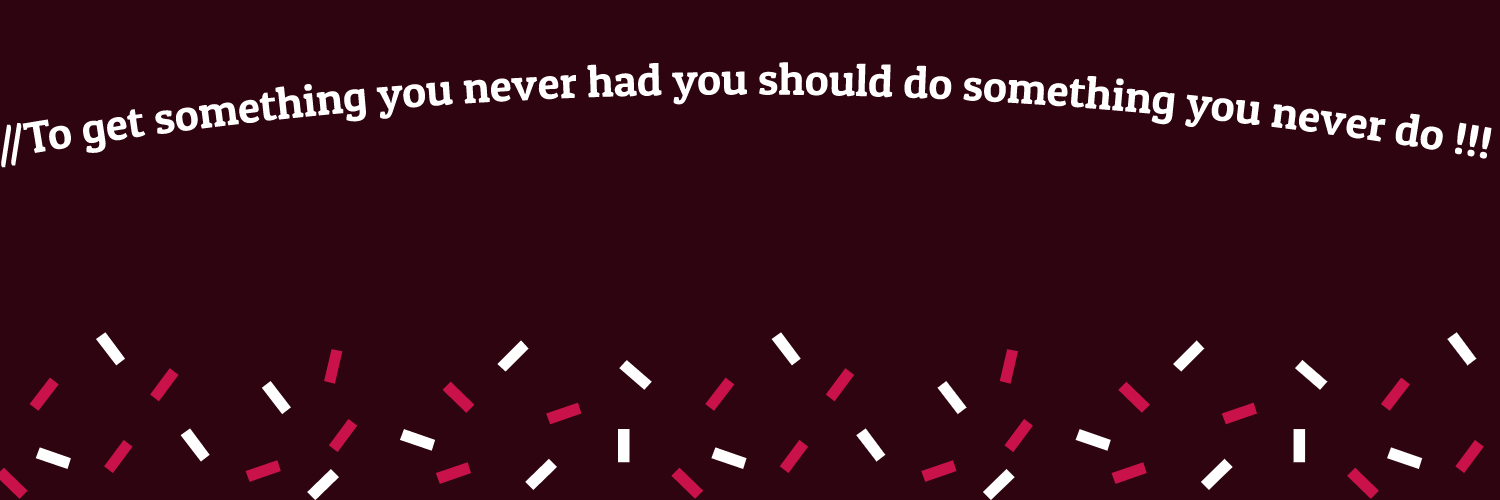
<style>
.page{position:relative;width:1500px;height:500px;background:#2f0411}
.page>*{position:absolute;margin:0}
.t1{font:45px "PatuaOne-Regular";color:#ffffff}
</style>
<div class="page">
<p class="t1" style="left:0px;top:62px;width:1492px;height:106px;text-align:center">//To get something you never had you should do something you never do !!!</p>
</div>
